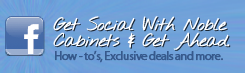
<style>
.page{position:relative;width:245px;height:73px}
.page>*{position:absolute;margin:0}
.t1{font:18px/16px "NothingYouCouldDo";letter-spacing:-0.06em;color:#ffffff;font-weight:bold}
.t2{font:12px "MyriadPro-Regular";letter-spacing:-0.06em;color:#36598c;font-weight:bold}
</style>
<div class="page">
<p class="t1" style="left:53px;top:16px;width:177px;height:34px">Get Social With Noble <br>Cabinets &amp; Get Ahead.</p>
<p class="t2" style="left:55px;top:50px;width:168px;height:13px">How - to’s, Exclusive deals and more.</p>
</div>
